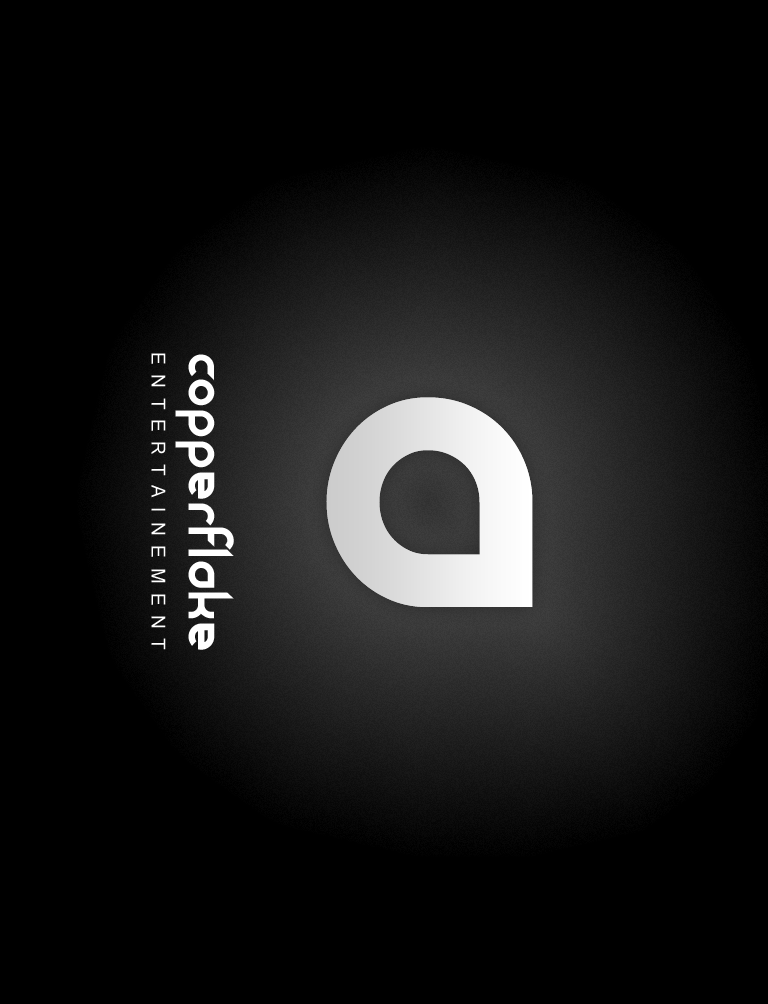
<style>
.page{position:relative;width:768px;height:1004px;background:#000000}
.page>*{position:absolute;margin:0}
.t1{font:19px "ArialMT";letter-spacing:0.5em;color:#ffffff;text-transform:uppercase}
.t2{font:51.2px "DirtyFlamingo";color:#ffffff}
.t3{font:410px "DirtyFlamingo";color:#e8e8e8}
</style>
<div class="page">
<p class="t1" style="left:151px;top:353px;width:15px;height:297px;rotate:90deg">entertainement</p>
<p class="t2" style="left:175px;top:354px;width:59px;height:296px;rotate:90deg">copperflake</p>
<p class="t3" style="left:326px;top:397px;width:207px;height:210px;rotate:90deg">a</p>
<p class="t3" style="left:326px;top:397px;width:207px;height:210px;rotate:90deg">a</p>
</div>
